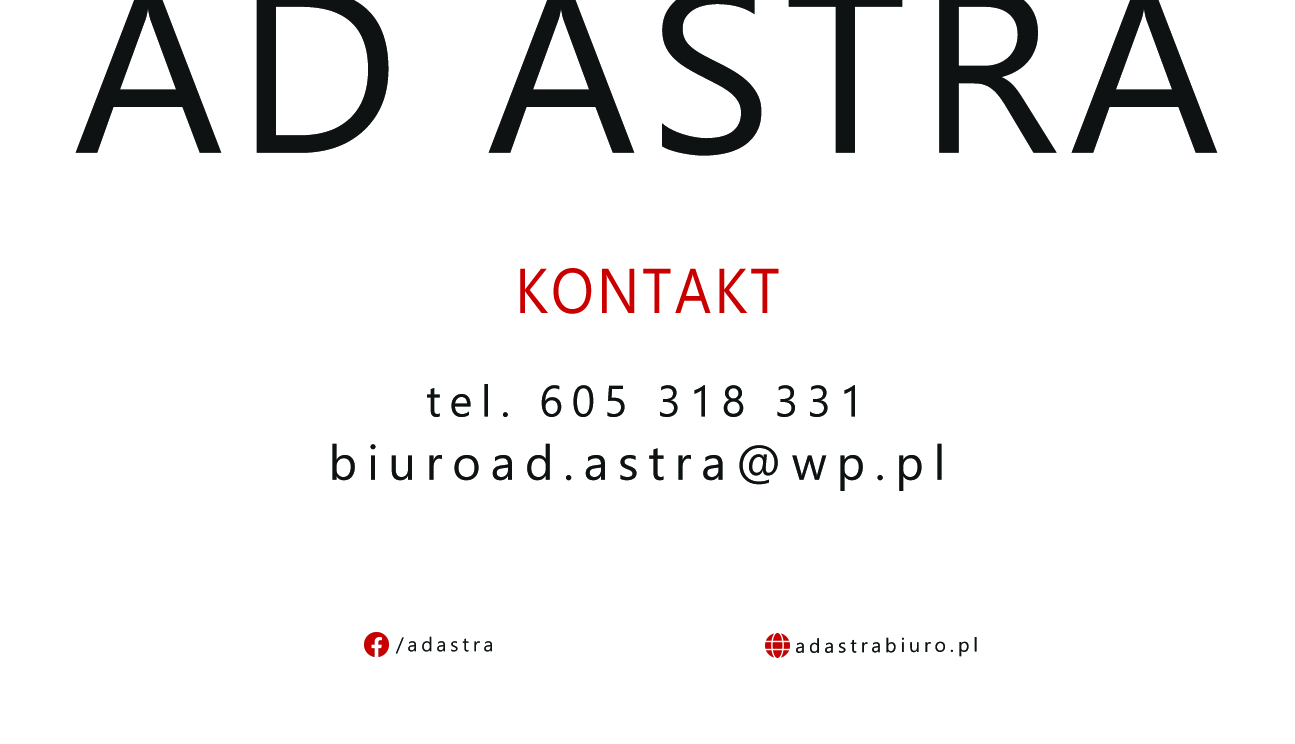
<style>
.page{position:relative;width:1295px;height:744px;background:#ffffff}
.page>*{position:absolute;margin:0}
.t1{font:63.2px "Gadugi";letter-spacing:0.05em;color:#c90000;text-transform:uppercase;scale:0.9 1}
.t2{font:43.8px "Gadugi";letter-spacing:0.2em;color:#0f1212}
.t3{font:48.6px "Gadugi";letter-spacing:0.2em;color:#0f1212}
.t4{font:19.4px "Gadugi";letter-spacing:0.2em;color:#0f1212}
</style>
<div class="page">
<p class="t1" style="left:520px;top:268px;width:259px;height:46px">kontakt</p>
<p class="t2" style="left:427px;top:384px;width:428px;height:33px">tel. 605 318 331</p>
<p class="t3" style="left:332px;top:443px;width:610px;height:48px">biuroad.astra@wp.pl</p>
<p class="t4" style="left:395px;top:636px;width:97px;height:18px">/adastra</p>
<p class="t4" style="left:796px;top:637px;width:181px;height:20px">adastrabiuro.pl</p>
</div>
